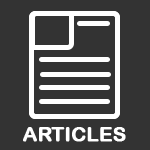
<style>
.page{position:relative;width:150px;height:150px;background:#333333}
.page>*{position:absolute;margin:0}
.t1{font:20px "ArialRoundedMTBold";letter-spacing:-0.005em;color:#ffffff;text-transform:uppercase;font-weight:bold}
</style>
<div class="page">
<p class="t1" style="left:23px;top:127px;width:103px;height:15px">Articles</p>
</div>
